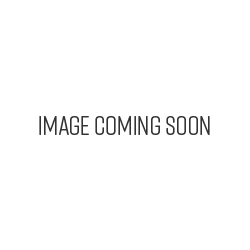
<style>
.page{position:relative;width:250px;height:250px;background:#ffffff}
.page>*{position:absolute;margin:0}
.t1{font:26.4px "RiftSoft-Regular";letter-spacing:-0.01em;color:#333333}
</style>
<div class="page">
<p class="t1" style="left:39px;top:116px;width:171px;height:19px">Image coming soon</p>
</div>
